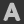
<style>
.page{position:relative;width:24px;height:24px;background:#333333}
.page>*{position:absolute;margin:0}
.t1{font:26px "LucidaConsole";color:#c3c3c3}
</style>
<div class="page">
<p class="t1" style="left:4px;top:3px;width:16px;height:17px">A</p>
</div>
